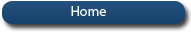
<style>
.page{position:relative;width:191px;height:32px}
.page>*{position:absolute;margin:0}
.t1{font:14px "MyriadPro-Regular";color:#fcfdfe}
</style>
<div class="page">
<p class="t1" style="left:71px;top:6px;width:35px;height:10px">Home</p>
</div>
